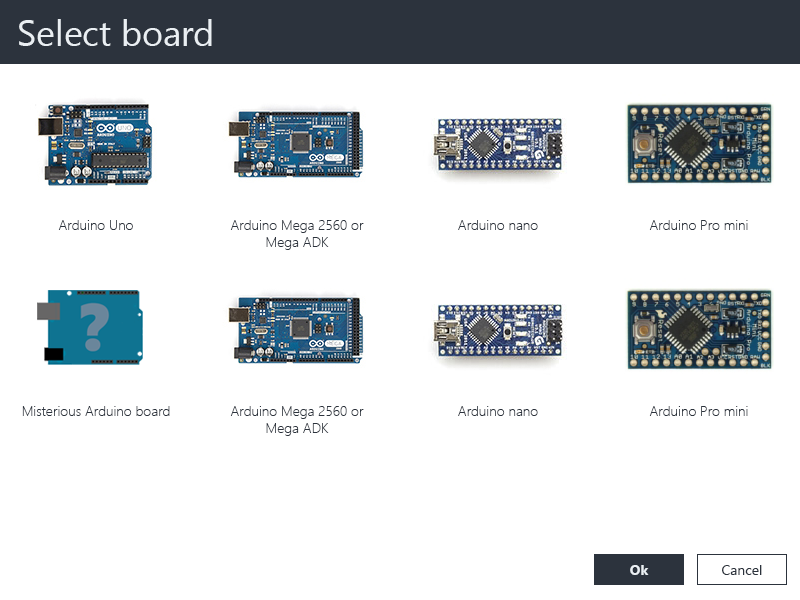
<style>
.page{position:relative;width:800px;height:600px;background:#ffffff}
.page>*{position:absolute;margin:0}
.t1{font:36px "SegoeUI";color:#eaeff3}
.t2{font:14px "SegoeUI-Light";color:#2c333d}
.t3{font:14px "SegoeUI-Bold";color:#eaeff3}
.t4{font:14px "SegoeUI";color:#2c333d}
</style>
<div class="page">
<p class="t1" style="left:19px;top:19px;width:193px;height:27px">Select board</p>
<p class="t2" style="left:58px;top:220px;width:75px;height:10px">Arduino Uno</p>
<p class="t2" style="left:230px;top:220px;width:134px;height:30px;text-align:center">Arduino Mega 2560 or Mega ADK</p>
<p class="t2" style="left:458px;top:220px;width:80px;height:10px">Arduino nano</p>
<p class="t2" style="left:649px;top:220px;width:99px;height:10px">Arduino Pro mini</p>
<p class="t2" style="left:22px;top:406px;width:148px;height:10px">Misterious Arduino board</p>
<p class="t2" style="left:230px;top:406px;width:134px;height:30px;text-align:center">Arduino Mega 2560 or Mega ADK</p>
<p class="t2" style="left:458px;top:406px;width:80px;height:10px">Arduino nano</p>
<p class="t2" style="left:649px;top:406px;width:99px;height:10px">Arduino Pro mini</p>
<p class="t3" style="left:630px;top:565px;width:19px;height:10px">Ok</p>
<p class="t4" style="left:722px;top:565px;width:40px;height:10px">Cancel</p>
</div>
